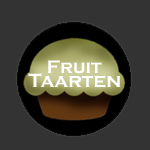
<style>
.page{position:relative;width:150px;height:150px;background:#333333}
.page>*{position:absolute;margin:0}
.t1{font:18.7px "CopperplateGothic-Bold";color:#ffffff}
.t2{font:20px "CopperplateGothic-Bold";color:#ffffff}
</style>
<div class="page">
<p class="t1" style="left:47px;top:60px;width:55px;height:14px">Fruit</p>
<p class="t2" style="left:28px;top:73px;width:93px;height:15px">Taarten</p>
</div>
